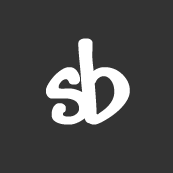
<style>
.page{position:relative;width:173px;height:173px;background:#333333}
.page>*{position:absolute;margin:0}
.t1{font:122.9px "Andy-Bold";letter-spacing:-0.14em;color:#ffffff}
</style>
<div class="page">
<p class="t1" style="left:46px;top:38px;width:84px;height:87px">sb</p>
</div>
